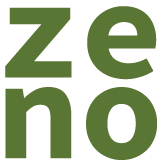
<style>
.page{position:relative;width:163px;height:163px;background:#ffffff}
.page>*{position:absolute;margin:0}
.t1{font:140px "SourceCodePro-Bold";color:#5a7635}
</style>
<div class="page">
<p class="t1" style="left:5px;top:6px;width:152px;height:74px">ze</p>
<p class="t1" style="left:5px;top:87px;width:152px;height:73px">no</p>
</div>
